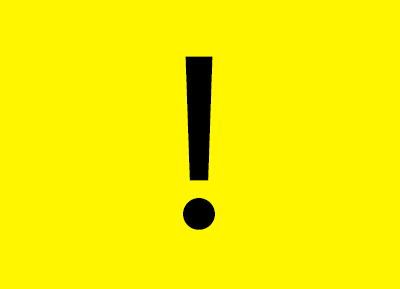
<style>
.page{position:relative;width:400px;height:289px;background:#fff600}
.page>*{position:absolute;margin:0}
.t1{font:279.9px "KlinicSlab-Medium";color:#000000}
</style>
<div class="page">
<p class="t1" style="left:183px;top:56px;width:32px;height:174px">!</p>
</div>
